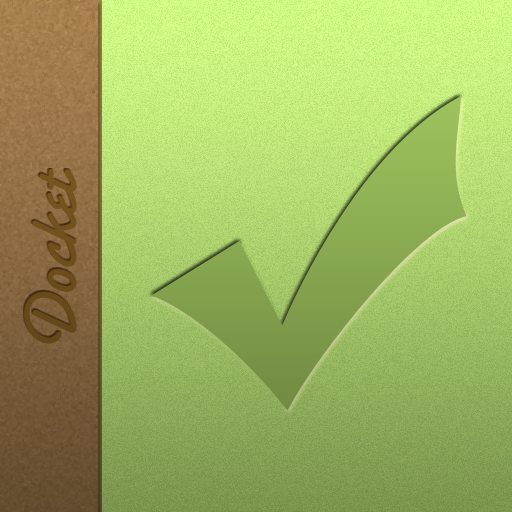
<style>
.page{position:relative;width:512px;height:512px}
.page>*{position:absolute;margin:0}
.t1{font:80px "SantaFeLetPlain";color:#6b4d1b}
</style>
<div class="page">
<p class="t1" style="left:23px;top:168px;width:54px;height:176px;rotate:-90deg">Docket</p>
</div>
